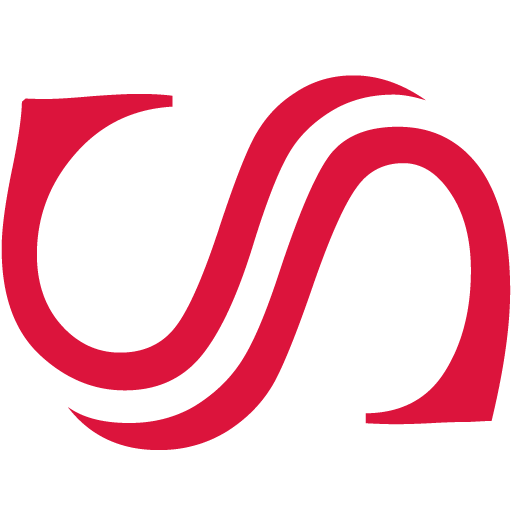
<style>
.page{position:relative;width:512px;height:512px;background:#ffffff}
.page>*{position:absolute;margin:0}
.t1{font:948px "ColonnaMT";color:#dc143c}
</style>
<div class="page">
<p class="t1" style="left:1px;top:75px;width:510px;height:375px;rotate:90deg">S</p>
</div>
